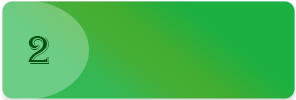
<style>
.page{position:relative;width:296px;height:100px}
.page>*{position:absolute;margin:0}
.t1{font:41.7px "Algerian";color:#095412}
</style>
<div class="page">
<p class="t1" style="left:28px;top:36px;width:21px;height:28px">2</p>
</div>
